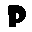
<style>
.page{position:relative;width:32px;height:32px;background:#ffffff}
.page>*{position:absolute;margin:0}
.t1{font:28.3px "ShowcardGothic-Reg";color:#000000}
</style>
<div class="page">
<p class="t1" style="left:8px;top:5px;width:18px;height:22px">P</p>
</div>
